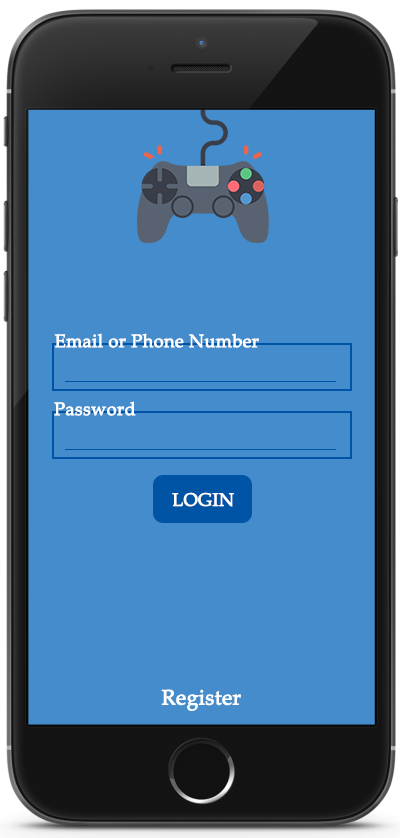
<style>
.page{position:relative;width:400px;height:838px;background:#448ccb}
.page>*{position:absolute;margin:0}
.t1{font:18px "BookAntiqua";color:#ffffff;font-weight:bold}
.t2{font:21px "BookAntiqua";color:#ffffff;font-weight:bold}
</style>
<div class="page">
<p class="t1" style="left:54px;top:333px;width:205px;height:15px">Email or Phone Number</p>
<p class="t1" style="left:54px;top:401px;width:82px;height:15px">Password</p>
<p class="t1" style="left:172px;top:492px;width:62px;height:15px">LOGIN</p>
<p class="t2" style="left:161px;top:689px;width:80px;height:22px">Register</p>
</div>
